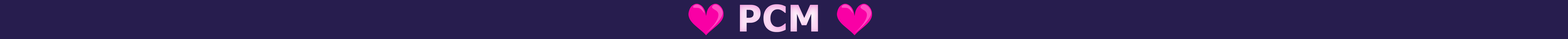
<style>
.page{position:relative;width:1568px;height:39px;background:#271d4e}
.page>*{position:absolute;margin:0}
.t1{font:36.9px "Tahoma-Bold";letter-spacing:0.025em;color:#f9d2f1}
</style>
<div class="page">
<p class="t1" style="left:740px;top:4px;width:78px;height:28px">PCM</p>
</div>
